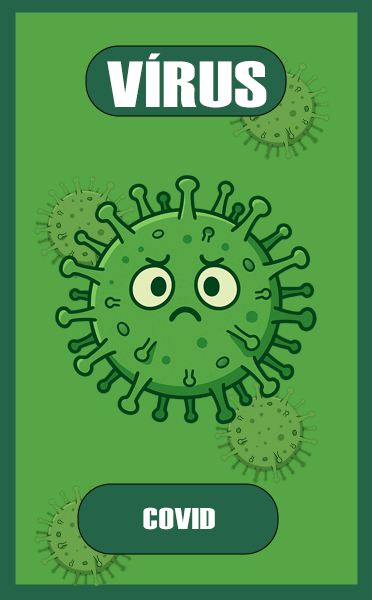
<style>
.page{position:relative;width:372px;height:600px;background:#56a645}
.page>*{position:absolute;margin:0}
.t1{font:65px "Haettenschweiler";letter-spacing:0.015em;color:#ffffff;scale:1.35 1}
.t2{font:30px "Haettenschweiler";letter-spacing:0.015em;color:#ffffff;scale:1.35 1}
</style>
<div class="page">
<p class="t1" style="left:107px;top:53px;width:160px;height:55px">VÍRUS</p>
<p class="t2" style="left:143px;top:507px;width:72px;height:23px">COVID</p>
</div>
